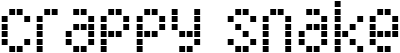
<style>
.page{position:relative;width:400px;height:53px;background:#ffffff}
.page>*{position:absolute;margin:0}
.t1{font:59.6px "SubwayTicker";color:#000000}
</style>
<div class="page">
<p class="t1" style="left:1px;top:1px;width:398px;height:51px">crappy snake</p>
</div>
